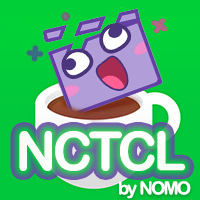
<style>
.page{position:relative;width:200px;height:200px}
.page>*{position:absolute;margin:0}
.t1{font:53.8px "ArialRoundedMTBold";letter-spacing:-0.1em;color:#ffffff}
.t2{font:18px "ArialRoundedMTBold";letter-spacing:-0.1em;color:#ffffff}
</style>
<div class="page">
<p class="t1" style="left:19px;top:131px;width:167px;height:40px;opacity:0.95">NCTCL</p>
<p class="t2" style="left:119px;top:181px;width:72px;height:18px">by NOMO</p>
</div>
